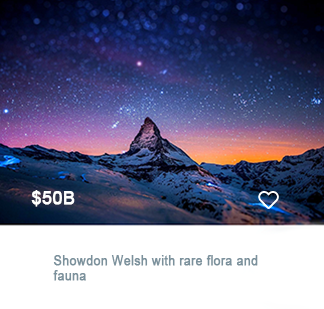
<style>
.page{position:relative;width:324px;height:309px;background:#ffffff}
.page>*{position:absolute;margin:0}
.t1{font:18px "ArialMT";color:#ffffff;font-weight:bold}
.t2{font:12.5px "ArialMT";color:#7b919c;font-weight:bold}
</style>
<div class="page">
<p class="t1" style="left:31px;top:190px;width:44px;height:17px">$50B</p>
<p class="t2" style="left:53px;top:255px;width:205px;height:26px">Showdon Welsh with rare flora and fauna</p>
</div>
